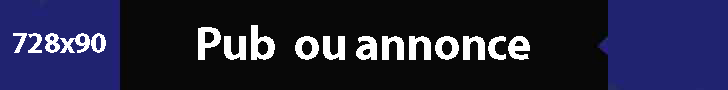
<style>
.page{position:relative;width:728px;height:90px;background:#080808}
.page>*{position:absolute;margin:0}
.t1{font:48px "MyriadPro-Bold";letter-spacing:-0.025em;color:#ffffff}
.t2{font:30px "MyriadPro-Bold";letter-spacing:-0.025em;color:#ffffff}
</style>
<div class="page">
<p class="t1" style="left:198px;top:25px;width:332px;height:35px">Pub  ou annonce</p>
<p class="t2" style="left:13px;top:33px;width:93px;height:20px">728x90</p>
</div>
